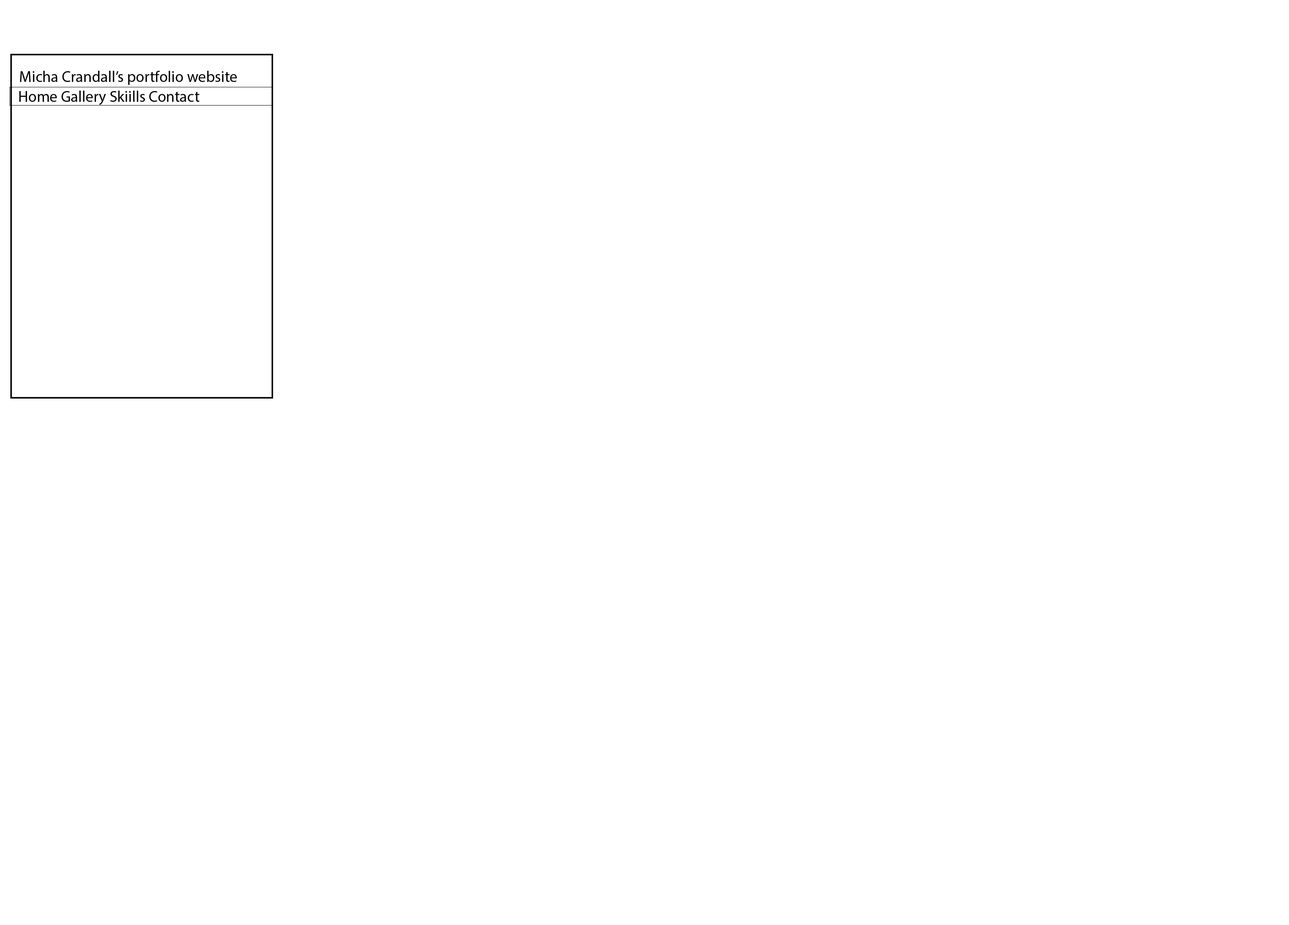
<style>
.page{position:relative;width:1289px;height:925px;background:#ffffff}
.page>*{position:absolute;margin:0}
.t1{font:15.5px "MyriadPro-Regular";color:#000000}
</style>
<div class="page">
<p class="t1" style="left:20px;top:71px;width:217px;height:14px">Micha Crandall’s portfolio website</p>
<p class="t1" style="left:19px;top:91px;width:180px;height:14px">Home Gallery Skiills Contact</p>
</div>
